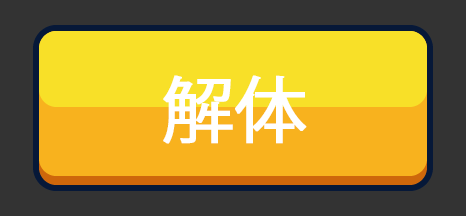
<style>
.page{position:relative;width:466px;height:216px;background:#333333}
.page>*{position:absolute;margin:0}
.t1{font:72px "KozGoPr6N-Regular";color:#ffffff;text-transform:uppercase;font-weight:bold}
</style>
<div class="page">
<p class="t1" style="left:163px;top:75px;width:144px;height:69px">解体</p>
</div>
